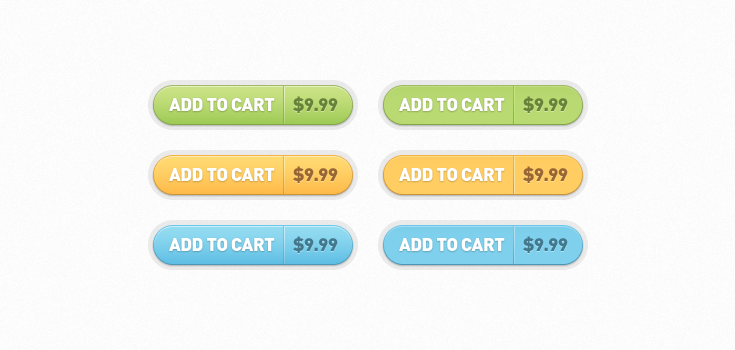
<style>
.page{position:relative;width:735px;height:350px}
.page>*{position:absolute;margin:0}
.t1{font:18.2px "DIN-Black";letter-spacing:-0.025em;color:#ffffff;text-transform:uppercase}
.t2{font:18px "DIN-Black";letter-spacing:-0.025em;color:#678338;text-transform:uppercase}
.t3{font:18px "DIN-Black";letter-spacing:-0.025em;color:#996633;text-transform:uppercase}
.t4{font:18px "DIN-Black";letter-spacing:-0.025em;color:#42788e;text-transform:uppercase}
</style>
<div class="page">
<p class="t1" style="left:169px;top:98px;width:106px;height:13px">Add to Cart</p>
<p class="t2" style="left:293px;top:96px;width:45px;height:17px">$9.99</p>
<p class="t1" style="left:399px;top:98px;width:106px;height:13px">Add to Cart</p>
<p class="t2" style="left:523px;top:96px;width:45px;height:17px">$9.99</p>
<p class="t1" style="left:169px;top:168px;width:106px;height:13px">Add to Cart</p>
<p class="t3" style="left:293px;top:166px;width:45px;height:17px">$9.99</p>
<p class="t1" style="left:399px;top:168px;width:106px;height:13px">Add to Cart</p>
<p class="t3" style="left:523px;top:166px;width:45px;height:17px">$9.99</p>
<p class="t1" style="left:169px;top:238px;width:106px;height:13px">Add to Cart</p>
<p class="t4" style="left:293px;top:236px;width:45px;height:17px">$9.99</p>
<p class="t1" style="left:399px;top:238px;width:106px;height:13px">Add to Cart</p>
<p class="t4" style="left:523px;top:236px;width:45px;height:17px">$9.99</p>
</div>
